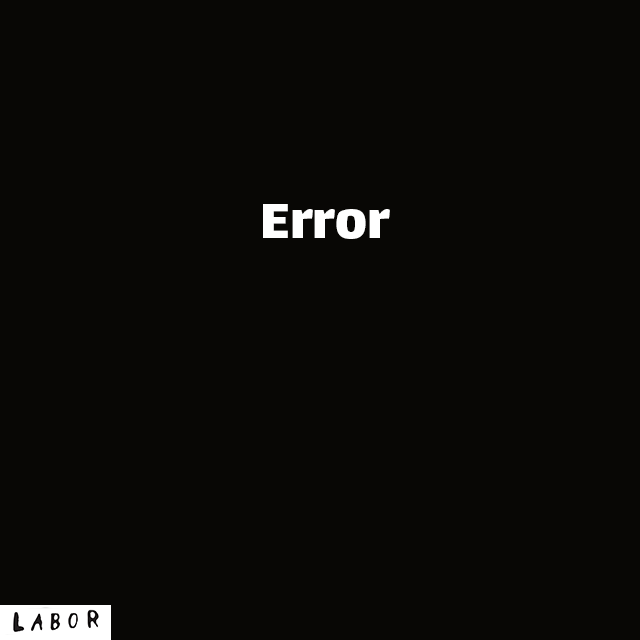
<style>
.page{position:relative;width:640px;height:640px;background:#080705}
.page>*{position:absolute;margin:0}
.t1{font:60px "Lalezar-Regular";color:#ffffff}
</style>
<div class="page">
<p class="t1" style="left:263px;top:204px;width:127px;height:35px">Error</p>
</div>
